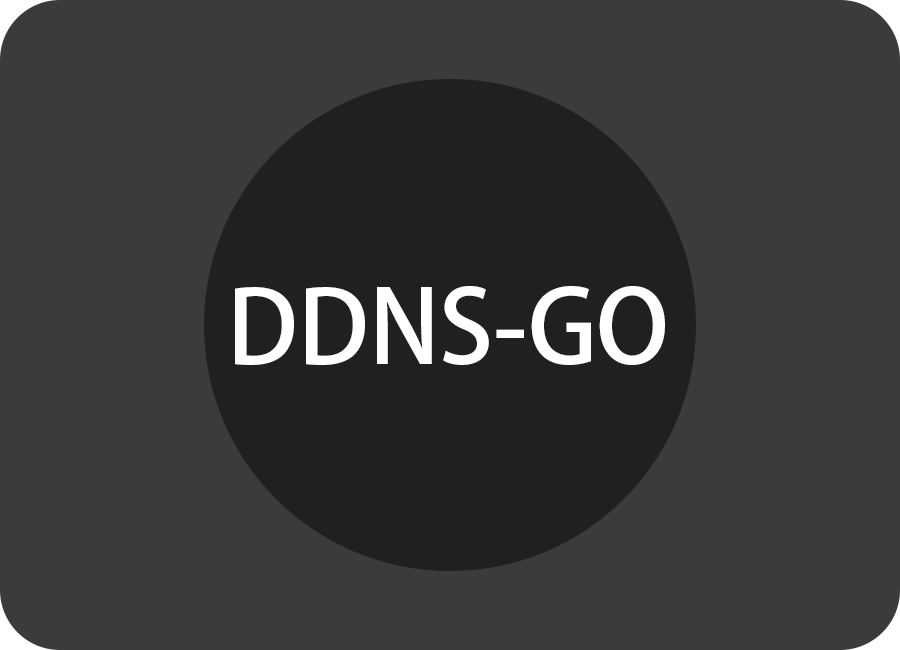
<style>
.page{position:relative;width:900px;height:650px;background:#3b3b3b}
.page>*{position:absolute;margin:0}
.t1{font:100px "AdobeHeitiStd-Regular";color:#ffffff}
</style>
<div class="page">
<p class="t1" style="left:235px;top:286px;width:430px;height:79px">DDNS-GO</p>
</div>
